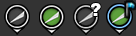
<style>
.page{position:relative;width:136px;height:36px;background:#333333}
.page>*{position:absolute;margin:0}
.t1{font:17.7px "Arial-Black";letter-spacing:0.03em;color:#ffffff}
</style>
<div class="page">
<p class="t1" style="left:91px;top:3px;width:10px;height:13px">?</p>
</div>
